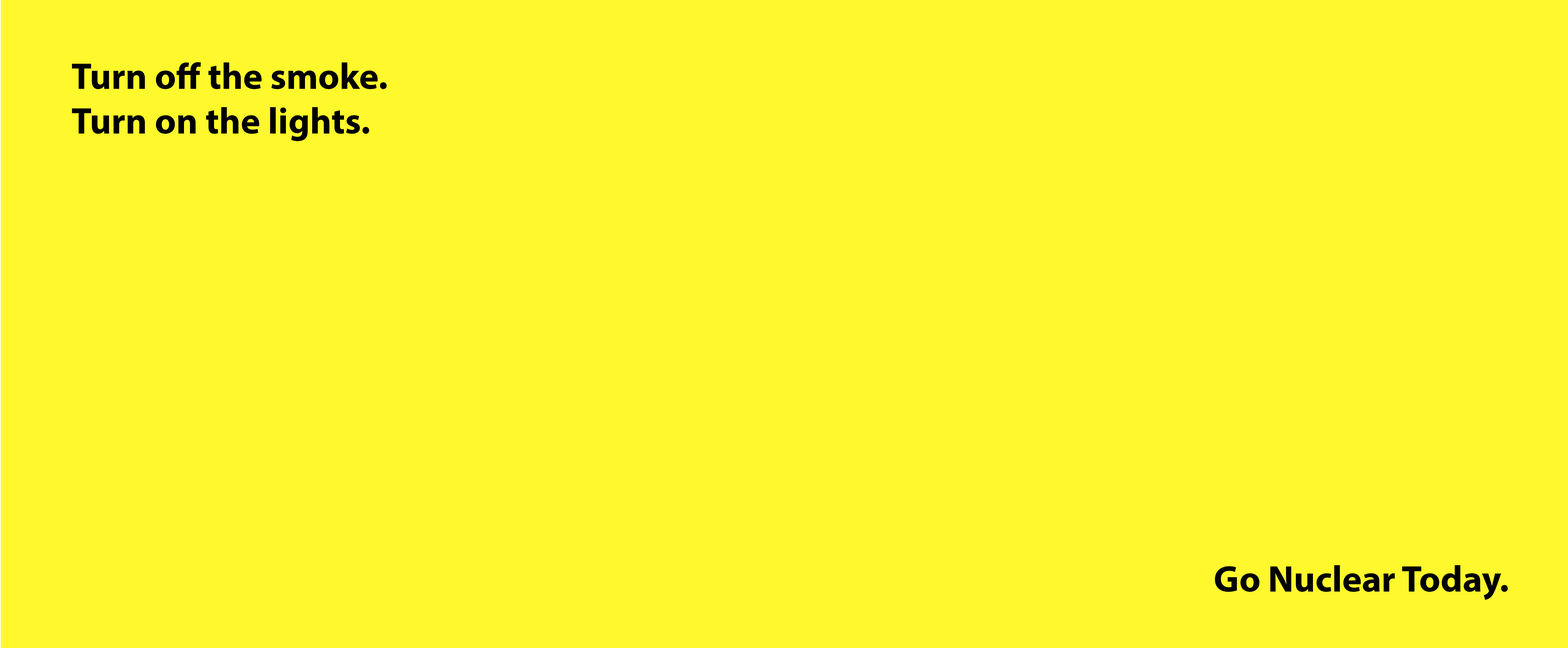
<style>
.page{position:relative;width:1568px;height:648px;background:#fff82c}
.page>*{position:absolute;margin:0}
.t1{font:37.1px "MyriadPro-Bold";color:#000000}
</style>
<div class="page">
<p class="t1" style="left:72px;top:62px;width:315px;height:79px">Turn off the smoke.<br>Turn on the lights.</p>
<p class="t1" style="left:1215px;top:565px;width:293px;height:35px">Go Nuclear Today.</p>
</div>
